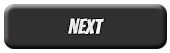
<style>
.page{position:relative;width:170px;height:53px;background:#312f2f}
.page>*{position:absolute;margin:0}
.t1{font:21px "Bangers-Regular";color:#f0eeee}
</style>
<div class="page">
<p class="t1" style="left:68px;top:18px;width:36px;height:17px">next</p>
</div>
